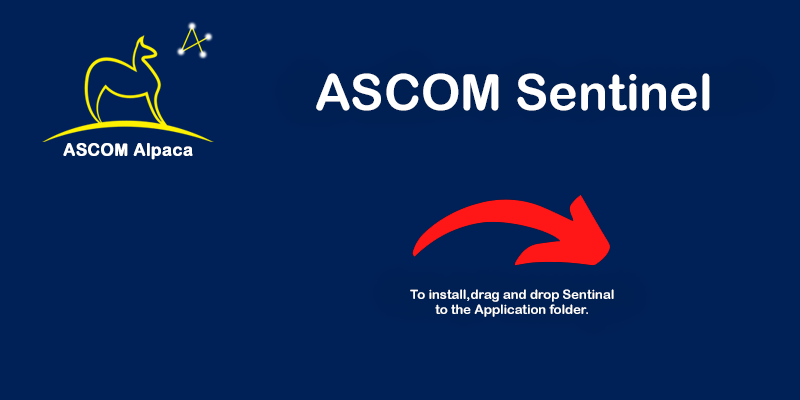
<style>
.page{position:relative;width:800px;height:400px;background:#002157}
.page>*{position:absolute;margin:0}
.t1{font:50px "ArialRoundedMTBold";color:#ffffff}
.t2{font:13px "ArialRoundedMTBold";color:#ffffff}
</style>
<div class="page">
<p class="t1" style="left:316px;top:73px;width:394px;height:38px">ASCOM Sentinel</p>
<p class="t2" style="left:410px;top:289px;width:204px;height:28px;text-align:center">To install,drag and drop Sentinal<br>to the Application folder.</p>
</div>
